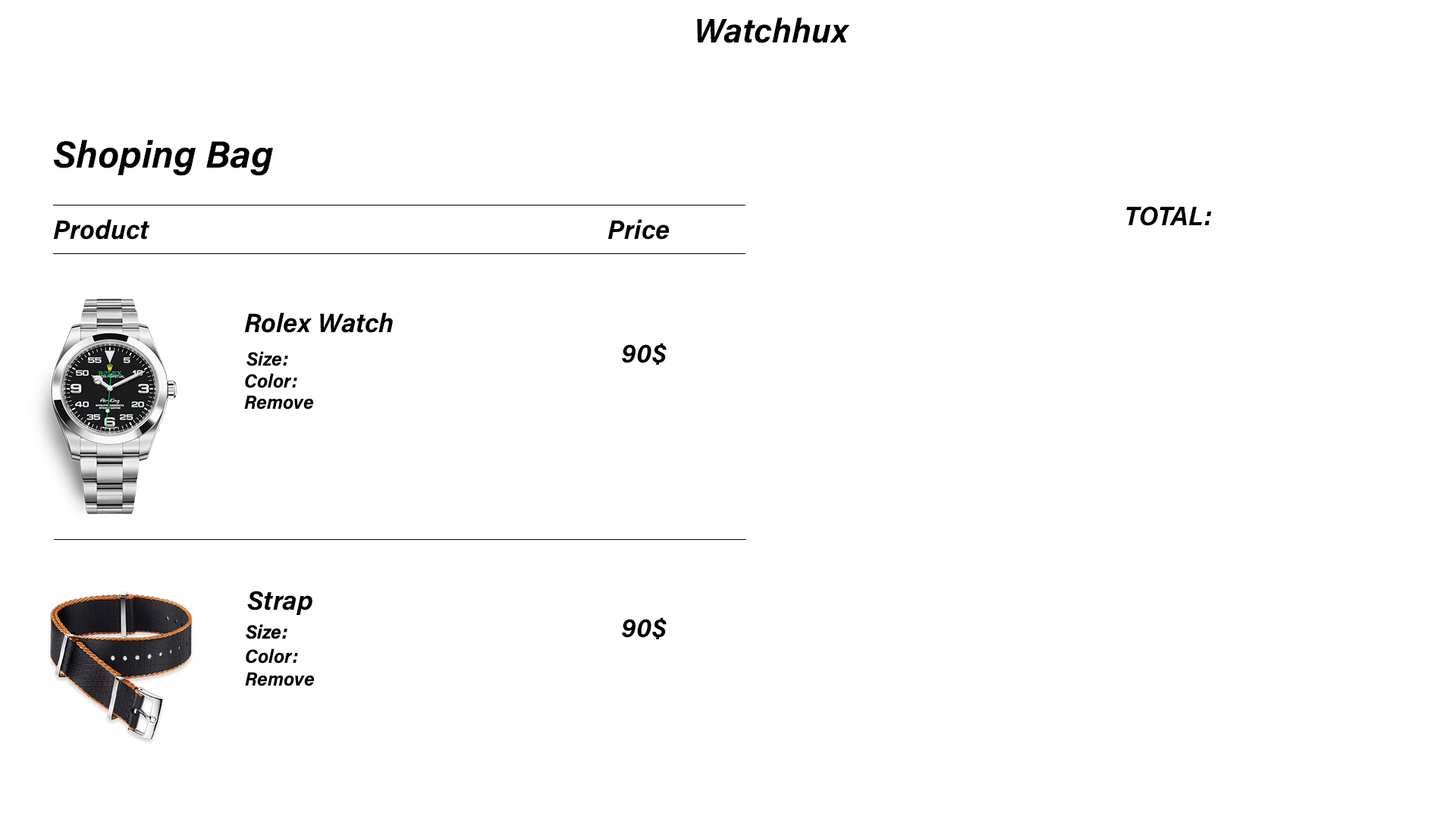
<style>
.page{position:relative;width:1456px;height:819px;background:#ffffff}
.page>*{position:absolute;margin:0}
.t1{font:34.1px "AcuminConcept-BoldItalic";color:#000000}
.t2{font:37.9px "AcuminConcept-BoldItalic";color:#000000}
.t3{font:26.5px "AcuminConcept-BoldItalic";color:#000000}
.t4{font:19px "AcuminConcept-BoldItalic";color:#000000}
</style>
<div class="page">
<p class="t1" style="left:697px;top:17px;width:153px;height:26px">Watchhux</p>
<p class="t2" style="left:53px;top:140px;width:220px;height:36px">Shoping Bag</p>
<p class="t3" style="left:1126px;top:206px;width:86px;height:20px">TOTAL:</p>
<p class="t3" style="left:53px;top:219px;width:97px;height:21px">Product</p>
<p class="t3" style="left:607px;top:219px;width:63px;height:21px">Price</p>
<p class="t3" style="left:244px;top:312px;width:149px;height:21px">Rolex Watch</p>
<p class="t4" style="left:246px;top:351px;width:42px;height:15px">Size:</p>
<p class="t3" style="left:622px;top:343px;width:45px;height:22px">90$</p>
<p class="t4" style="left:245px;top:373px;width:52px;height:15px">Color:</p>
<p class="t4" style="left:244px;top:395px;width:70px;height:14px">Remove</p>
<p class="t3" style="left:247px;top:591px;width:65px;height:24px">Strap</p>
<p class="t3" style="left:622px;top:617px;width:45px;height:22px">90$</p>
<p class="t4" style="left:246px;top:648px;width:52px;height:16px">Color:</p>
<p class="t4" style="left:245px;top:672px;width:70px;height:14px">Remove</p>
</div>
